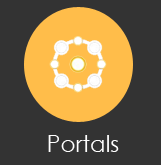
<style>
.page{position:relative;width:161px;height:165px;background:#333333}
.page>*{position:absolute;margin:0}
.t1{font:22.9px "CenturyGothic";color:#ffffff}
</style>
<div class="page">
<p class="t1" style="left:48px;top:135px;width:71px;height:17px">Portals</p>
</div>
